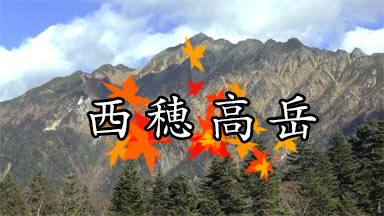
<style>
.page{position:relative;width:384px;height:216px}
.page>*{position:absolute;margin:0}
.t1{font:52px "DFKaiSho-Md-MP-RKSJ-H";letter-spacing:0.18em;color:#ffffff}
</style>
<div class="page">
<p class="t1" style="left:89px;top:94px;width:228px;height:47px">西穂高岳</p>
</div>
